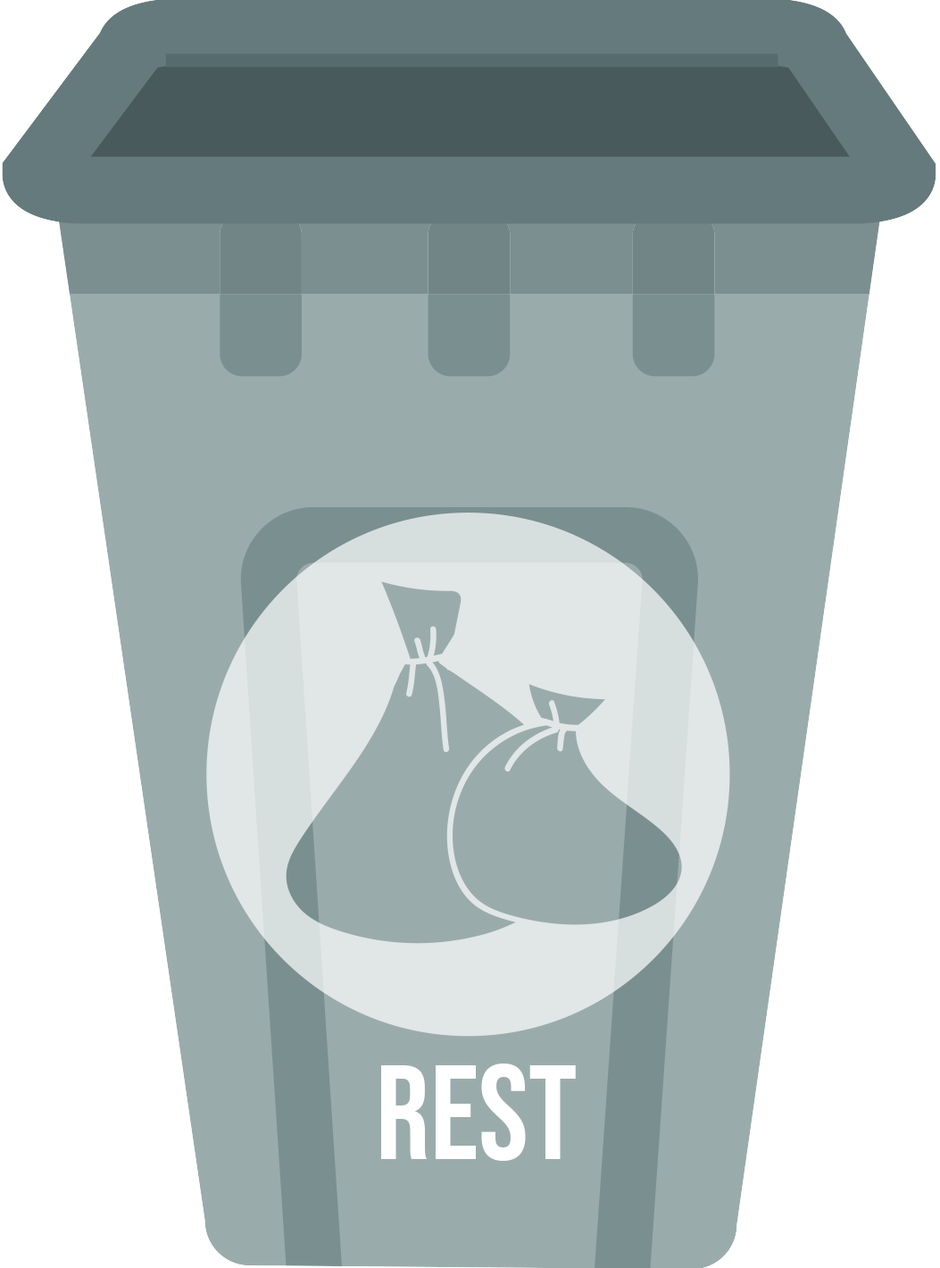
<style>
.page{position:relative;width:940px;height:1268px;background:#99acab}
.page>*{position:absolute;margin:0}
.t1{font:134px "BebasNeue-Regular";color:#ffffff}
</style>
<div class="page">
<p class="t1" style="left:381px;top:1064px;width:195px;height:97px">REST</p>
</div>
